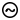
<style>
.page{position:relative;width:20px;height:20px;background:#ffffff}
.page>*{position:absolute;margin:0}
.t1{font:18.1px "Consolas";scale:1.07 1}
.t2{font:18.1px "Consolas";color:#000000;scale:1.07 1}
</style>
<div class="page">
<p class="t1" style="left:0px;top:8px;width:9px;height:5px">~</p>
<p class="t2" style="left:5px;top:8px;width:11px;height:5px">~</p>
</div>
